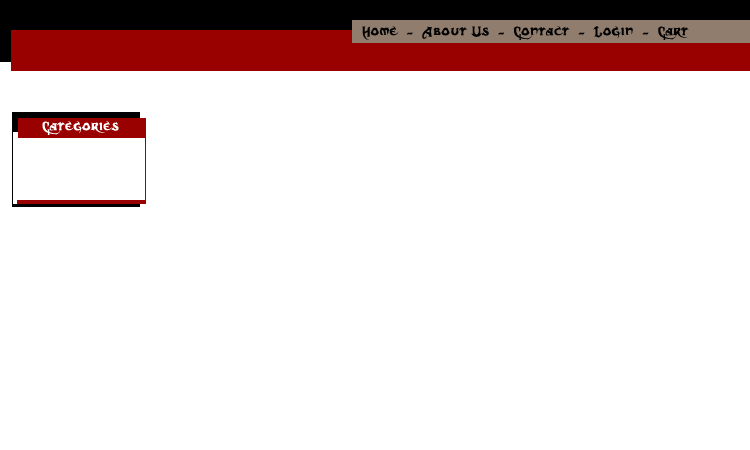
<style>
.page{position:relative;width:750px;height:450px;background:#ffffff}
.page>*{position:absolute;margin:0}
.t1{font:14px "DarkCrystalScript";letter-spacing:0.025em;color:#000000}
.t2{font:14px "DarkCrystalScript";letter-spacing:0.025em;color:#ffffff}
</style>
<div class="page">
<p class="t1" style="left:362px;top:26px;width:327px;height:14px">Home  -  About Us  -  Contact  -  Login  -  Cart</p>
<p class="t2" style="left:42px;top:121px;width:77px;height:14px">Categories</p>
</div>
